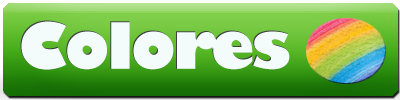
<style>
.page{position:relative;width:400px;height:100px}
.page>*{position:absolute;margin:0}
.t1{font:63.8px "GillSans-UltraBold";letter-spacing:-0.05em;color:#f3fbfb}
</style>
<div class="page">
<p class="t1" style="left:20px;top:20px;width:270px;height:50px">Colores</p>
</div>
